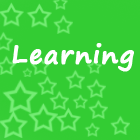
<style>
.page{position:relative;width:140px;height:140px;background:#33cc33}
.page>*{position:absolute;margin:0}
.t1{font:25.5px "SegoePrint-Bold";letter-spacing:0.025em;color:#ffffff;font-weight:bold}
</style>
<div class="page">
<p class="t1" style="left:12px;top:43px;width:122px;height:29px">Learning</p>
</div>
